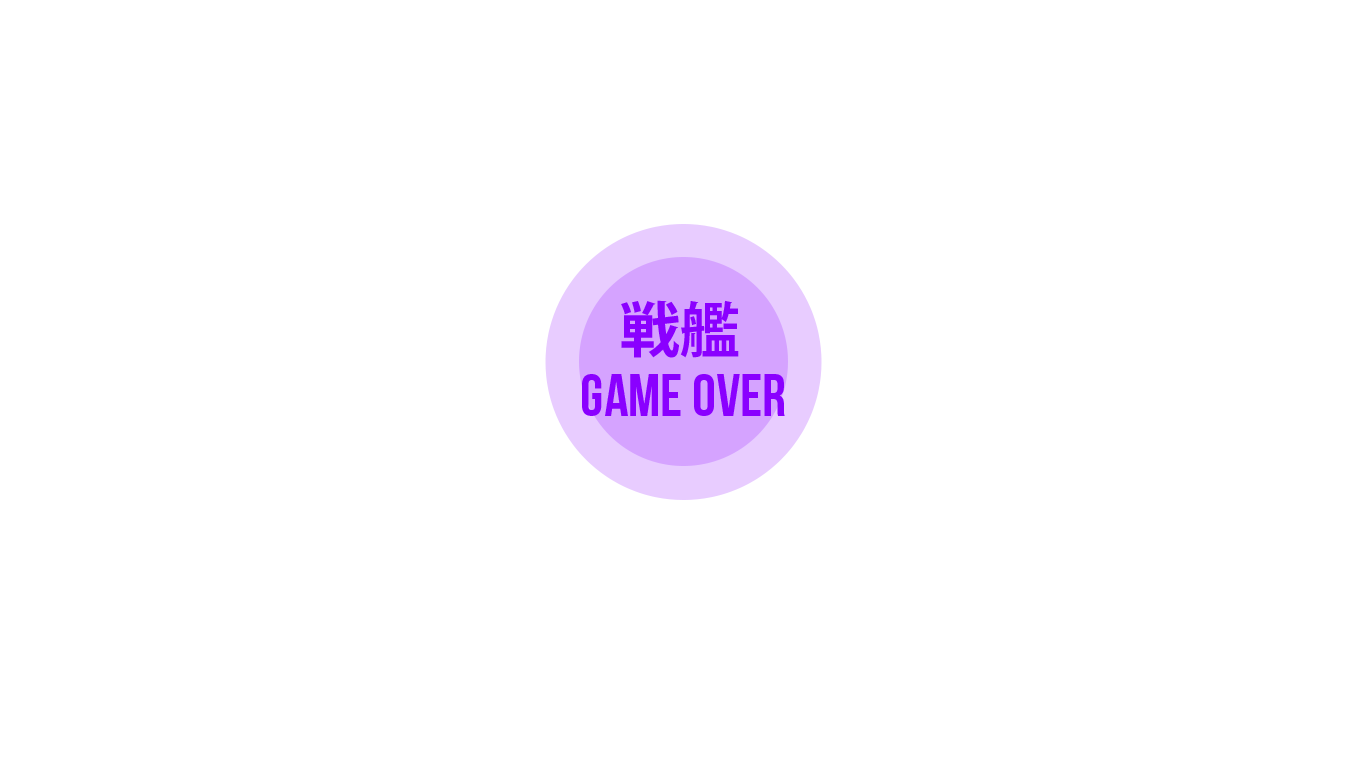
<style>
.page{position:relative;width:1366px;height:768px;background:#ffffff}
.page>*{position:absolute;margin:0}
.t1{font:60px "KozGoPr6N-Bold";color:#8a00ff}
.t2{font:60px "BebasNeue";color:#8a00ff}
</style>
<div class="page">
<p class="t1" style="left:621px;top:300px;width:118px;height:58px">戦艦</p>
<p class="t2" style="left:582px;top:374px;width:203px;height:42px">Game Over</p>
</div>
